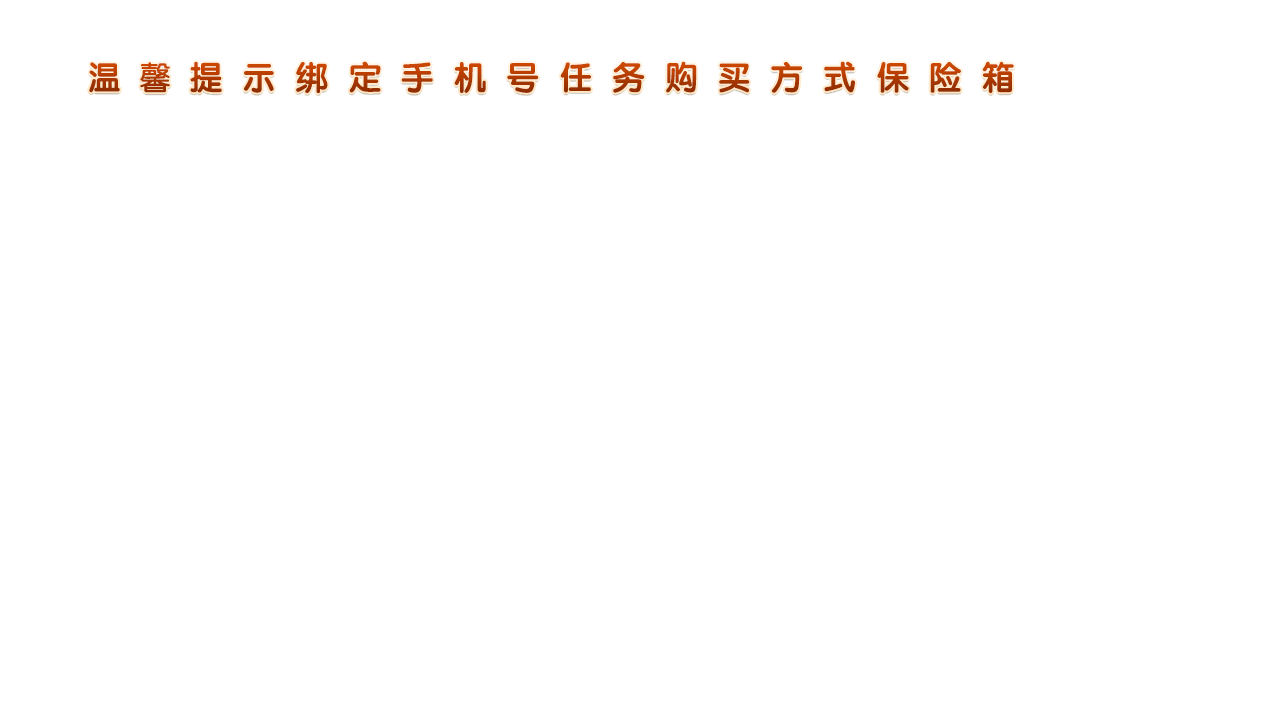
<style>
.page{position:relative;width:1280px;height:720px;background:#ffffff}
.page>*{position:absolute;margin:0}
.t1{font:32px "STYuanti-SC-Bold";letter-spacing:0.1em}
.t2{font:32px "STYuanti-SC-Regular";letter-spacing:0.1em;font-weight:bold}
.t3{font:32px "STYuanti-SC-Bold";letter-spacing:0.2em}
</style>
<div class="page">
<p class="t1" style="left:89px;top:62px;width:31px;height:31px">温</p>
<p class="t2" style="left:140px;top:62px;width:30px;height:31px">馨</p>
<p class="t3" style="left:190px;top:61px;width:824px;height:33px">提 示 绑 定 手 机 号 任 务 购 买 方 式 保 险 箱</p>
</div>
